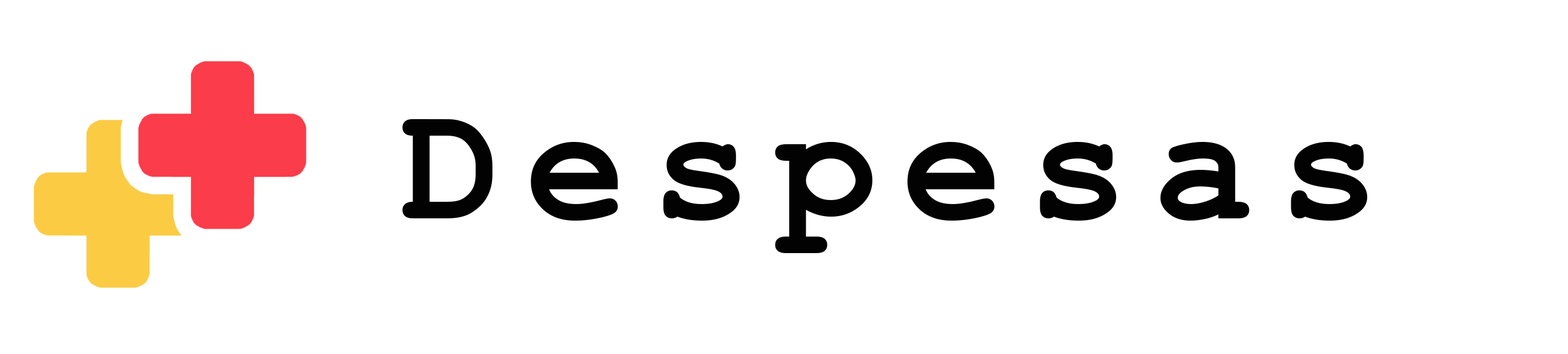
<style>
.page{position:relative;width:1568px;height:354px;background:#ffffff}
.page>*{position:absolute;margin:0}
.t1{font:167.4px "CourierNewPS-BoldMT";letter-spacing:0.15em;color:#020202}
.t2{font:167.4px "Tahoma";letter-spacing:0.15em;color:#020202}
</style>
<div class="page">
<p class="t1" style="left:402px;top:119px;width:966px;height:134px"><span class="t2"><br> <br></span>Despesas</p>
</div>
